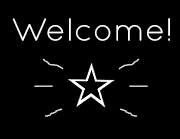
<style>
.page{position:relative;width:180px;height:139px;background:#000000}
.page>*{position:absolute;margin:0}
.t1{font:32px "Quicksand-Regular";color:#ffffff;scale:1.04 1}
</style>
<div class="page">
<p class="t1" style="left:12px;top:18px;width:158px;height:23px">Welcome!</p>
</div>
